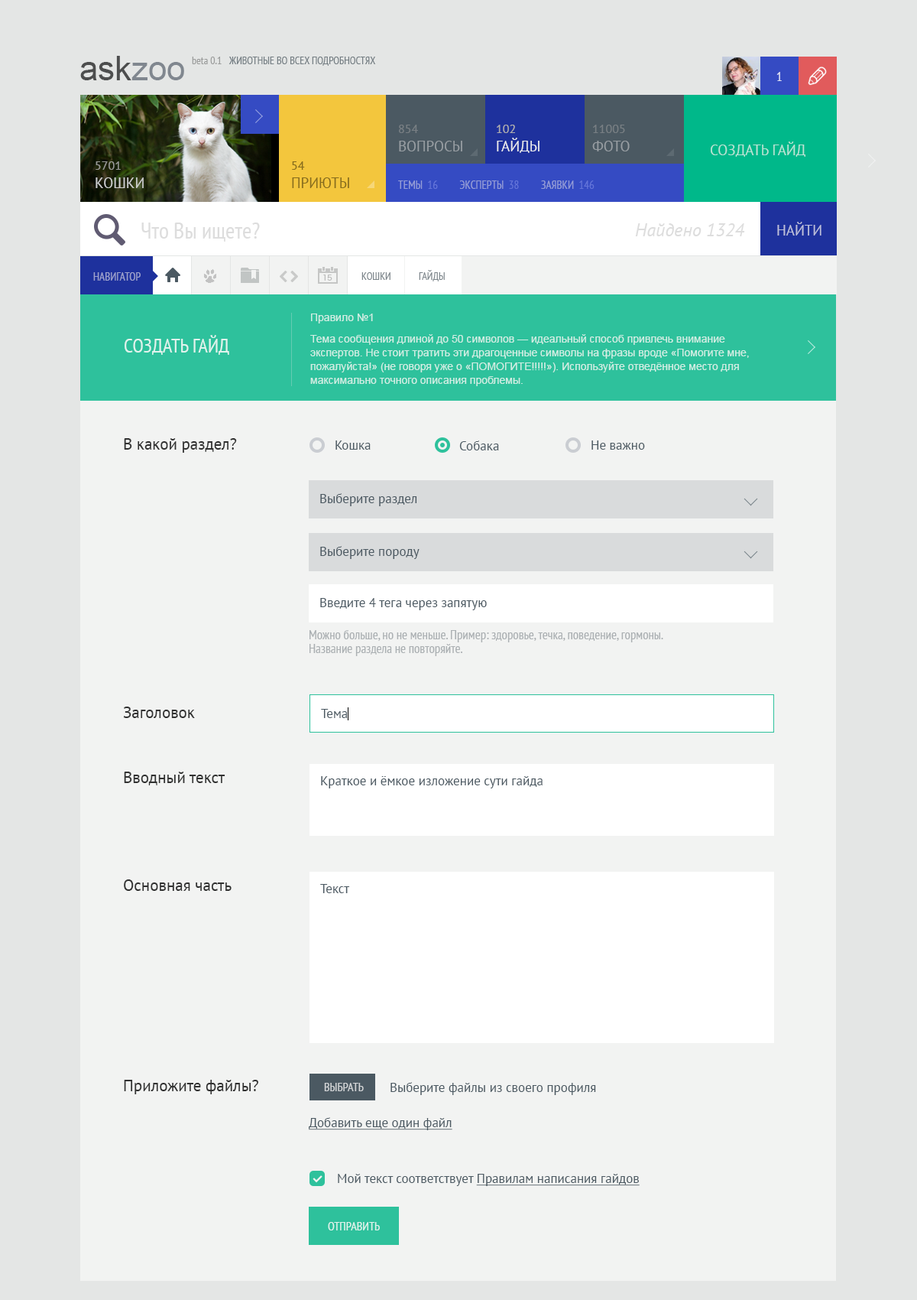
<style>
.page{position:relative;width:917px;height:1300px;background:#f2f3f2}
.page>*{position:absolute;margin:0}
.t1{font:10.7px/13.8px "ArialMT";color:#d0eee4}
.t2{font:10.7px/7.6px "ArialMT";color:#d0eee4}
.t3{font:19.9px "PTSans-Narrow";color:#e0f3ed;text-transform:uppercase}
.t4{font:16.1px "PTSans-Regular";color:#313131}
.t5{font:13px "PTSans-Regular";color:#4b5962}
.t6{font:13px/13.8px "PTSans-Narrow";color:#abb0b3}
.t7{font:12.2px "PTSans-Narrow";color:#d4d6d8;text-transform:uppercase}
.t8{font:13px "PTSans-Regular";color:#4b5962;text-decoration:underline}
.t9{font:12.2px "PTSans-Narrow";color:#e0f3ed;text-transform:uppercase}
</style>
<div class="page">
<p class="t1" style="left:310px;top:313px;width:439px;height:73px">Правило №1<br><br><span class="t2">Тема сообщения длиной до 50 символов — идеальный способ привлечь внимание<br></span>экспертов. Не стоит тратить эти драгоценные символы на фразы вроде «Помогите мне, пожалуйста!» (не говоря уже о «ПОМОГИТЕ!!!!!»). Используйте отведённое место для максимально точного описания проблемы.</p>
<p class="t3" style="left:125px;top:335px;width:104px;height:20px">создать гайд</p>
<p class="t4" style="left:124px;top:438px;width:113px;height:15px">В какой раздел?</p>
<p class="t5" style="left:336px;top:440px;width:35px;height:10px">Кошка</p>
<p class="t5" style="left:459px;top:440px;width:40px;height:10px">Собака</p>
<p class="t5" style="left:592px;top:440px;width:53px;height:10px">Не важно</p>
<p class="t5" style="left:320px;top:493px;width:97px;height:13px">Выберите раздел</p>
<p class="t5" style="left:320px;top:546px;width:100px;height:13px">Выберите породу</p>
<p class="t5" style="left:320px;top:598px;width:167px;height:12px">Введите 4 тега через запятую</p>
<p class="t6" style="left:310px;top:630px;width:354px;height:26px">Можно больше, но не меньше. Пример: здоровье, течка, поведение, гормоны. <br>Название раздела не повторяйте.</p>
<p class="t4" style="left:123px;top:706px;width:72px;height:12px">Заголовок</p>
<p class="t5" style="left:321px;top:709px;width:27px;height:9px">Тема</p>
<p class="t4" style="left:124px;top:771px;width:102px;height:14px">Вводный текст</p>
<p class="t5" style="left:321px;top:776px;width:222px;height:12px">Краткое и ёмкое изложение сути гайда</p>
<p class="t4" style="left:124px;top:879px;width:108px;height:12px">Основная часть</p>
<p class="t5" style="left:320px;top:884px;width:30px;height:9px">Текст</p>
<p class="t4" style="left:124px;top:1080px;width:134px;height:14px">Приложите файлы?</p>
<p class="t7" style="left:324px;top:1083px;width:40px;height:8px">Выбрать</p>
<p class="t5" style="left:391px;top:1082px;width:205px;height:13px">Выберите файлы из своего профиля</p>
<p class="t8" style="left:309px;top:1117px;width:144px;height:13px">Добавить еще один файл</p>
<p class="t8" style="left:338px;top:1174px;width:302px;height:12px"><span class="t5">Мой текст соответствует </span>Правилам написания гайдов</p>
<p class="t9" style="left:328px;top:1222px;width:52px;height:8px">отправить</p>
</div>
